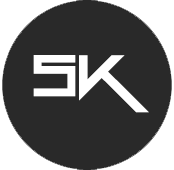
<style>
.page{position:relative;width:174px;height:170px;background:#292929}
.page>*{position:absolute;margin:0}
.t1{font:119.7px "Gang-Wolfik";color:#ffffff}
.t2{font:130px "Gang-Wolfik";color:#ffffff}
</style>
<div class="page">
<p class="t1" style="left:33px;top:55px;width:43px;height:42px">S</p>
<p class="t2" style="left:79px;top:55px;width:70px;height:58px">k</p>
</div>
